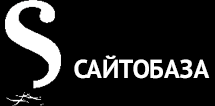
<style>
.page{position:relative;width:215px;height:106px;background:#000000}
.page>*{position:absolute;margin:0}
.t1{font:26px "PTSans-Bold";letter-spacing:-0.01em;color:#ffffff}
</style>
<div class="page">
<p class="t1" style="left:74px;top:55px;width:136px;height:24px">САЙТОБАЗА</p>
</div>
